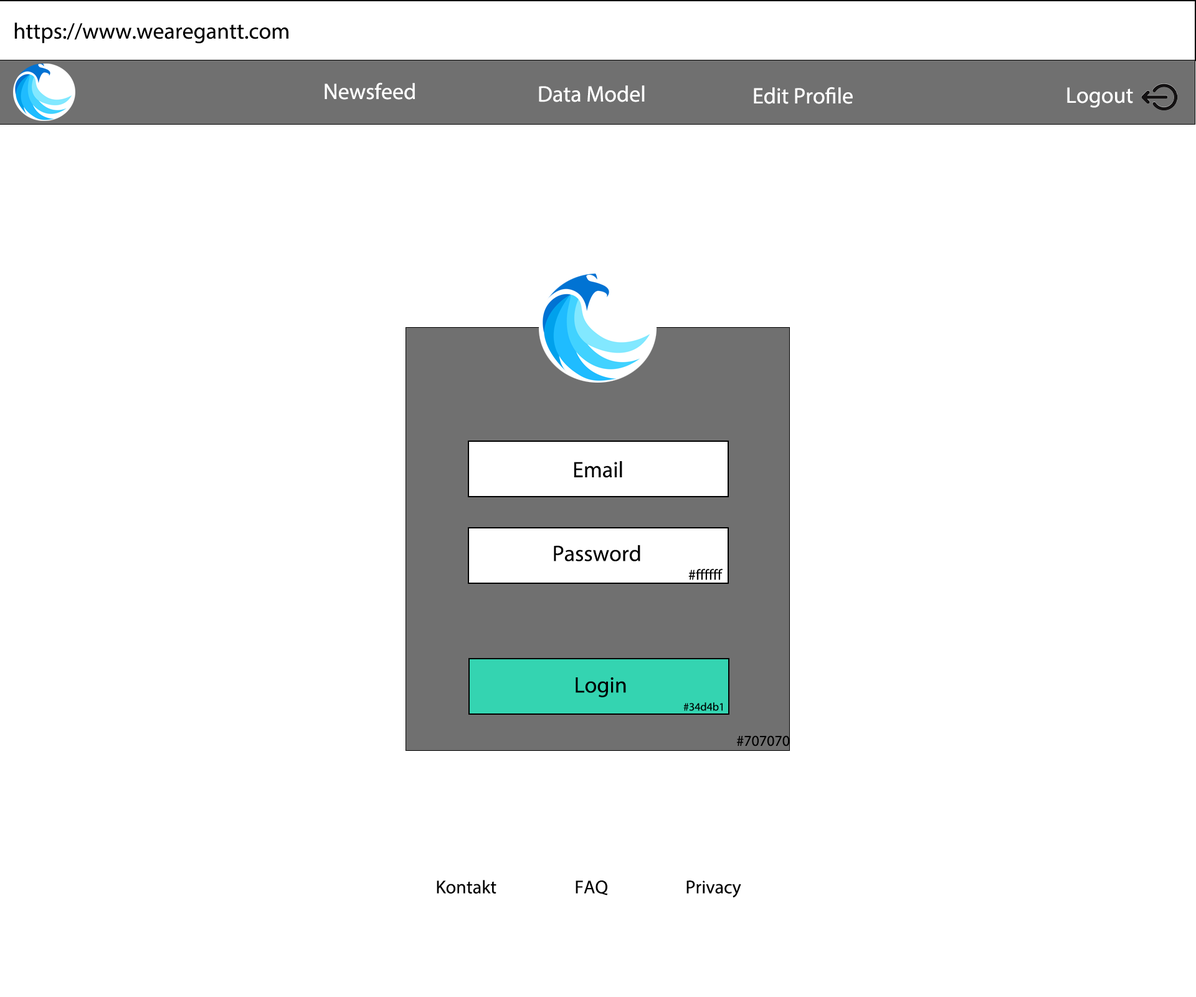
<style>
.page{position:relative;width:1196px;height:997px;background:#ffffff}
.page>*{position:absolute;margin:0}
.t1{font:22.4px "MyriadPro-Regular";color:#000000}
.t2{font:22.4px "MyriadPro-Regular";color:#ffffff}
.t3{font:15px "MyriadPro-Regular";color:#000000}
.t4{font:11.2px "MyriadPro-Regular";color:#000000}
.t5{font:18.7px "MyriadPro-Regular";color:#000000}
</style>
<div class="page">
<p class="t1" style="left:14px;top:22px;width:274px;height:22px">https://www.wearegantt.com</p>
<p class="t2" style="left:325px;top:82px;width:90px;height:18px">Newsfeed</p>
<p class="t2" style="left:539px;top:85px;width:106px;height:17px">Data Model</p>
<p class="t2" style="left:754px;top:87px;width:99px;height:17px">Edit Profile</p>
<p class="t2" style="left:1067px;top:87px;width:66px;height:21px">Logout</p>
<p class="t1" style="left:574px;top:461px;width:48px;height:17px">Email</p>
<p class="t1" style="left:554px;top:545px;width:86px;height:16px">Password</p>
<p class="t3" style="left:688px;top:568px;width:35px;height:12px">#ffffff</p>
<p class="t1" style="left:576px;top:677px;width:50px;height:20px">Login</p>
<p class="t4" style="left:683px;top:702px;width:40px;height:9px">#34d4b1</p>
<p class="t3" style="left:737px;top:735px;width:53px;height:11px">#707070</p>
<p class="t5" style="left:437px;top:880px;width:60px;height:13px">Kontakt</p>
<p class="t5" style="left:576px;top:880px;width:32px;height:15px">FAQ</p>
<p class="t5" style="left:687px;top:880px;width:54px;height:18px">Privacy</p>
</div>
